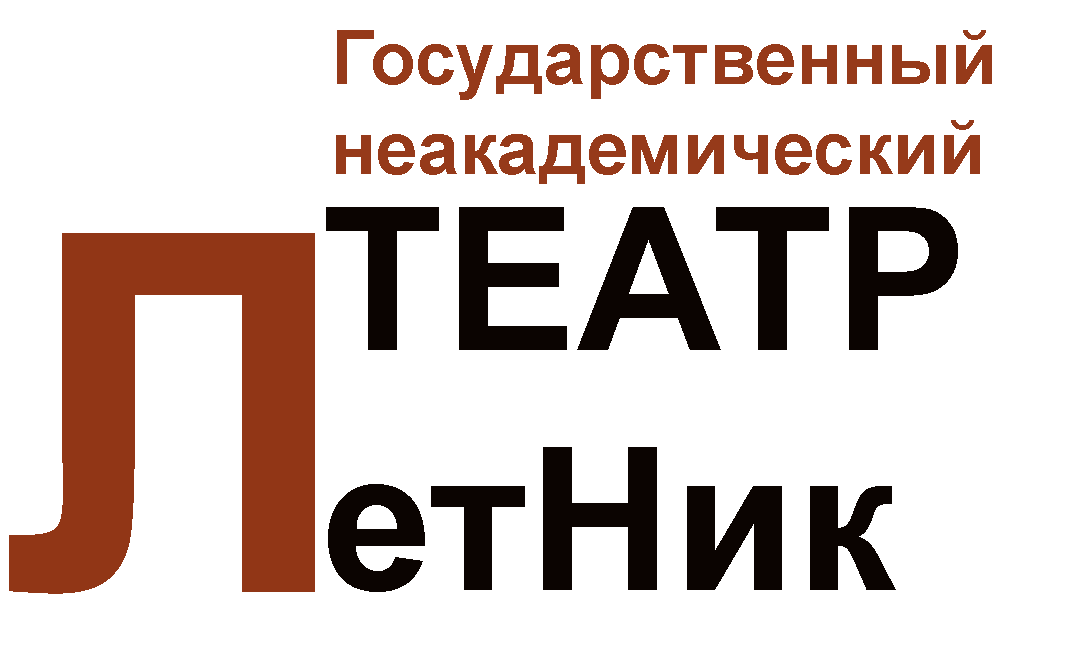
<style>
.page{position:relative;width:1083px;height:663px;background:#ffffff}
.page>*{position:absolute;margin:0}
.t1{font:75px "Arial-BoldMT";color:#963a1a}
.t2{font:200px "Arial-BoldMT";color:#0b0401}
.t3{font:500px "Arial-BoldMT";color:#913616}
</style>
<div class="page">
<p class="t1" style="left:336px;top:30px;width:656px;height:154px">Государственный<br>неакадемический</p>
<p class="t2" style="left:326px;top:207px;width:632px;height:385px">ТЕАТР<br>етНик</p>
<p class="t3" style="left:9px;top:233px;width:306px;height:361px">Л</p>
</div>
